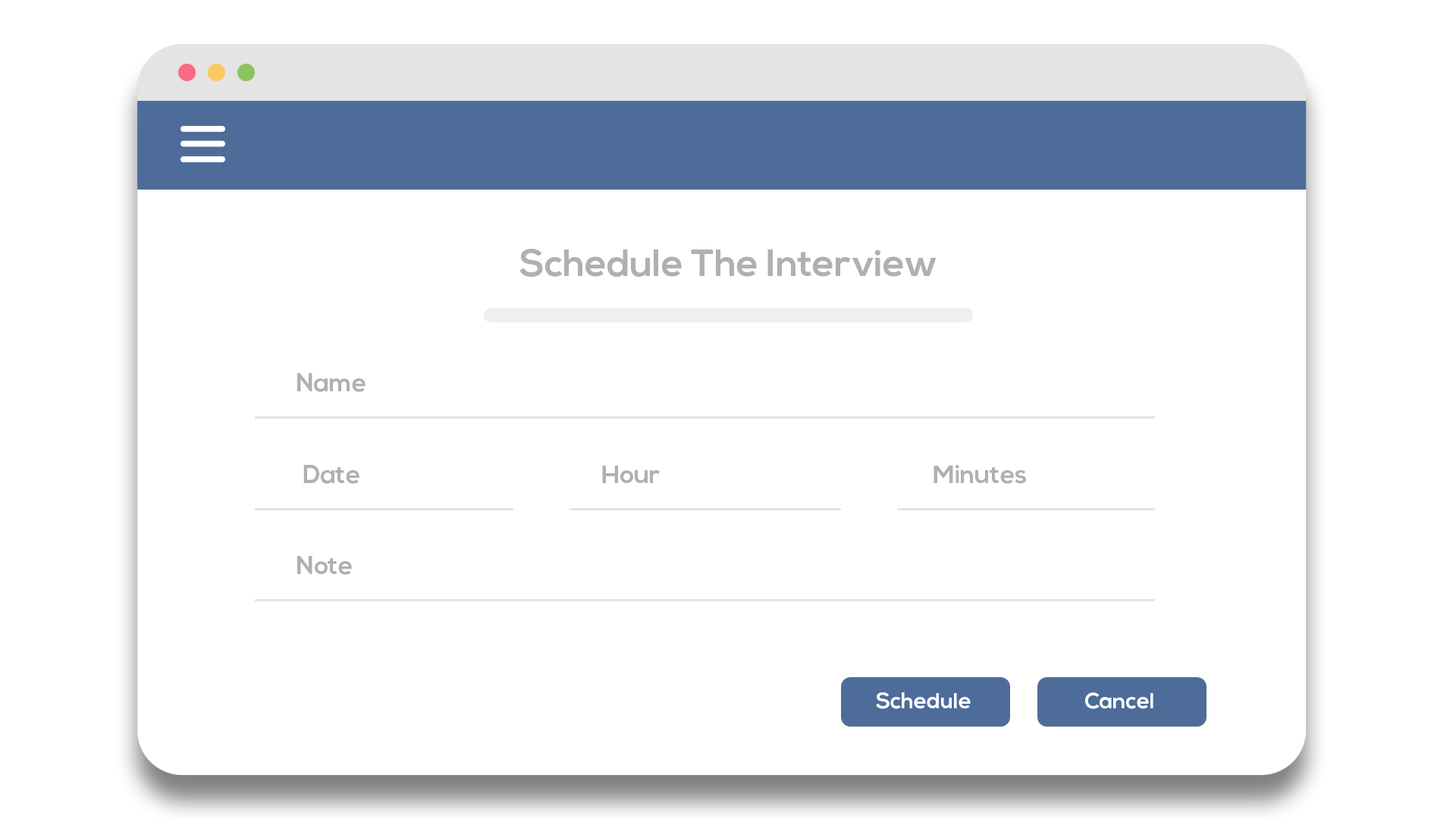
<style>
.page{position:relative;width:1456px;height:819px;background:#ffffff}
.page>*{position:absolute;margin:0}
.t1{font:37.9px "NexaBold";color:#b0b0b0}
.t2{font:25.3px "NexaBold";color:#b0b0b0}
.t3{font:22.1px "NexaBold";color:#ffffff}
</style>
<div class="page">
<p class="t1" style="left:519px;top:249px;width:418px;height:28px">Schedule The Interview</p>
<p class="t2" style="left:297px;top:373px;width:69px;height:19px">Name</p>
<p class="t2" style="left:303px;top:465px;width:56px;height:19px">Date</p>
<p class="t2" style="left:602px;top:466px;width:58px;height:17px">Hour</p>
<p class="t2" style="left:933px;top:465px;width:93px;height:19px">Minutes</p>
<p class="t2" style="left:297px;top:556px;width:55px;height:19px">Note</p>
<p class="t3" style="left:876px;top:692px;width:95px;height:17px">Schedule</p>
<p class="t3" style="left:1085px;top:692px;width:68px;height:17px">Cancel</p>
</div>
